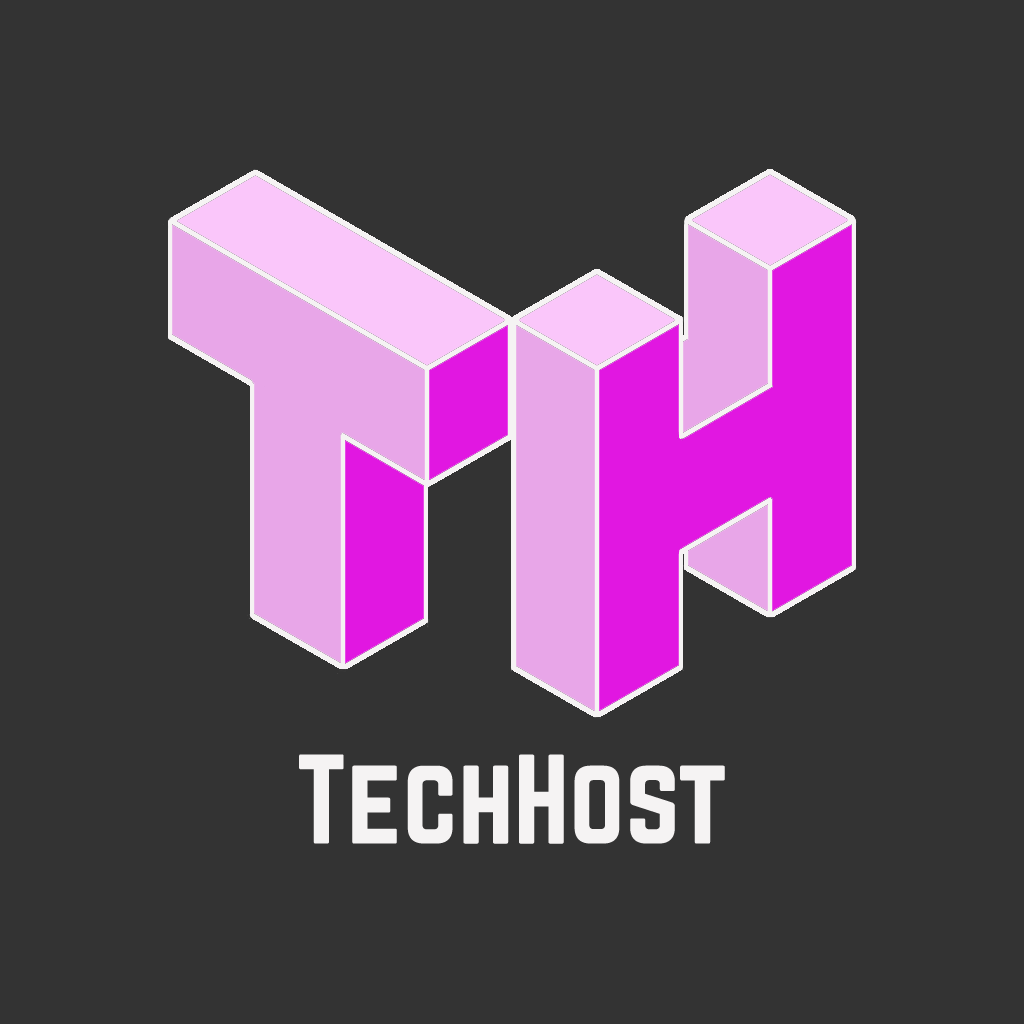
<style>
.page{position:relative;width:1024px;height:1024px;background:#333333}
.page>*{position:absolute;margin:0}
.t1{font:111.1px "Norwester-Regular";color:#f5f3f3}
</style>
<div class="page">
<p class="t1" style="left:299px;top:754px;width:426px;height:90px">TechHost</p>
</div>
